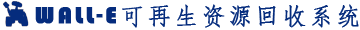
<style>
.page{position:relative;width:360px;height:30px;background:#ffffff}
.page>*{position:absolute;margin:0}
.t1{font:24px "STFangsong";letter-spacing:0.1em;color:#052c7d;font-weight:bold}
.t2{font:24px "Bauhaus93";letter-spacing:0.1em;color:#052c7d;font-weight:bold}
</style>
<div class="page">
<p class="t1" style="left:35px;top:4px;width:324px;height:24px"><span class="t2">WALL-E</span>可再生资源回收系统</p>
</div>
